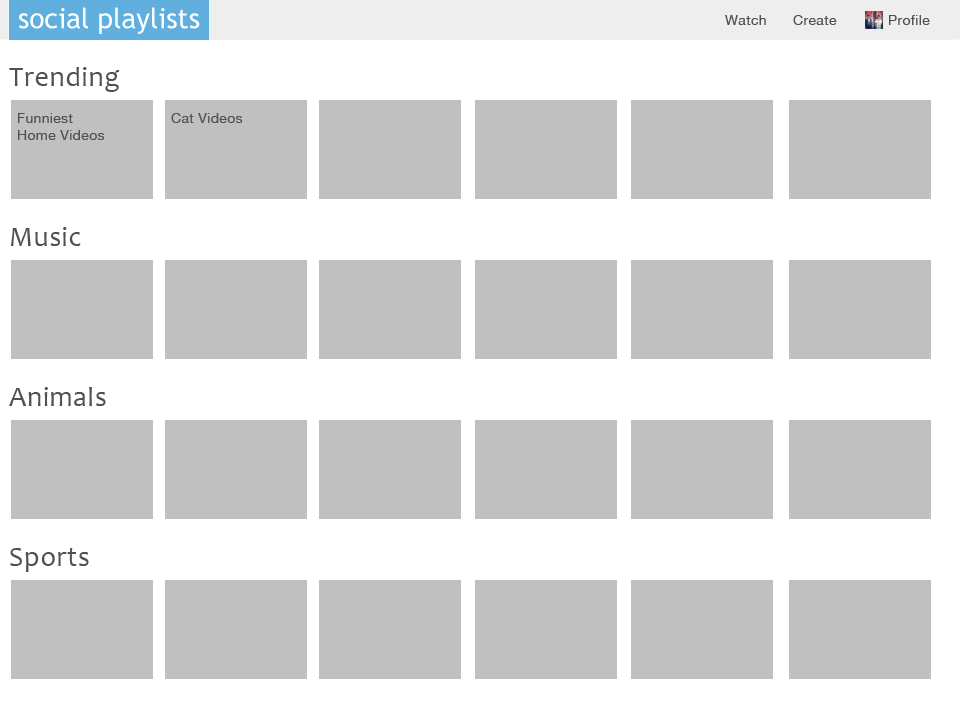
<style>
.page{position:relative;width:960px;height:720px;background:#c0c0c0}
.page>*{position:absolute;margin:0}
.t1{font:14px "HelveticaNeue";letter-spacing:0.025em;color:#515151}
.t2{font:28px "Candara";letter-spacing:0.025em;color:#515151}
</style>
<div class="page">
<p class="t1" style="left:725px;top:15px;width:41px;height:10px">Watch</p>
<p class="t1" style="left:793px;top:15px;width:44px;height:10px">Create</p>
<p class="t1" style="left:889px;top:15px;width:41px;height:10px">Profile</p>
<p class="t2" style="left:9px;top:67px;width:111px;height:25px">Trending</p>
<p class="t1" style="left:18px;top:113px;width:87px;height:27px">Funniest<br>Home Videos</p>
<p class="t1" style="left:171px;top:113px;width:72px;height:10px">Cat Videos</p>
<p class="t2" style="left:11px;top:227px;width:70px;height:19px">Music</p>
<p class="t2" style="left:9px;top:387px;width:97px;height:19px">Animals</p>
<p class="t2" style="left:10px;top:548px;width:79px;height:24px">Sports</p>
</div>
